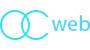
<style>
.page{position:relative;width:90px;height:50px;background:#ffffff}
.page>*{position:absolute;margin:0}
.t1{font:20px "AdobeHeitiStd-Regular";color:#59d4f1}
</style>
<div class="page">
<p class="t1" style="left:51px;top:15px;width:39px;height:16px">web</p>
</div>
